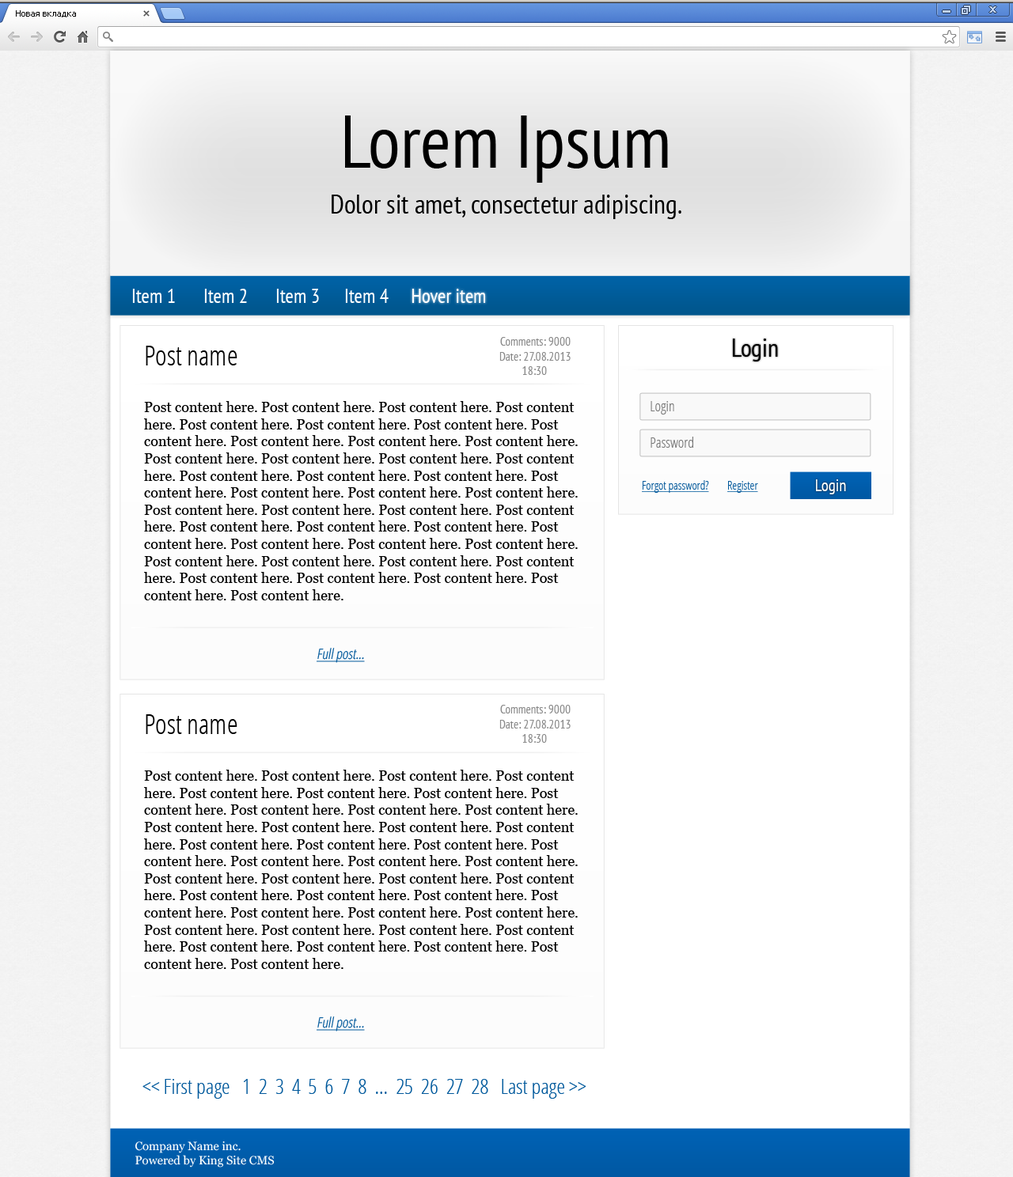
<style>
.page{position:relative;width:1013px;height:1177px;background:#ffffff}
.page>*{position:absolute;margin:0}
.t1{font:74.4px "PTSans-Narrow";color:#000000}
.t2{font:26.9px "PTSans-Narrow";color:#000000}
.t3{font:19.8px "PTSans-Narrow";color:#ffffff}
.t4{font:11.9px "PTSans-Narrow";color:#8b8b8b}
.t5{font:25.3px "PTSans-Narrow";color:#000000}
.t6{font:27.7px "OpenSans-CondensedLight";color:#000000}
.t7{font:14.2px "Georgia";color:#000000}
.t8{font:14.2px "OpenSans-CondensedLight";color:#797979}
.t9{font:11.9px "OpenSans-CondensedLight";color:#00589b;text-decoration:underline}
.t10{font:16.6px "PTSans-Narrow";color:#ffffff}
.t11{font:14.2px "OpenSans-CondensedLight";color:#00589b;font-style:italic;text-decoration:underline}
.t12{font:21.4px "OpenSans-CondensedLight";color:#00599c}
.t13{font:11.9px "Georgia";color:#ffffff}
</style>
<div class="page">
<p class="t1" style="left:345px;top:116px;width:323px;height:67px">Lorem Ipsum</p>
<p class="t2" style="left:332px;top:195px;width:349px;height:24px">Dolor sit amet, consectetur adipiscing.</p>
<p class="t3" style="left:132px;top:289px;width:43px;height:14px">Item 1</p>
<p class="t3" style="left:204px;top:289px;width:43px;height:14px">Item 2</p>
<p class="t3" style="left:276px;top:289px;width:43px;height:14px">Item 3</p>
<p class="t3" style="left:345px;top:289px;width:44px;height:14px">Item 4</p>
<p class="t3" style="left:411px;top:289px;width:75px;height:14px">Hover item</p>
<p class="t4" style="left:500px;top:337px;width:70px;height:9px">Comments: 9000</p>
<p class="t5" style="left:733px;top:339px;width:45px;height:23px">Login</p>
<p class="t6" style="left:146px;top:346px;width:91px;height:20px">Post name</p>
<p class="t4" style="left:499px;top:352px;width:71px;height:23px">Date: 27.08.2013 <br>         18:30</p>
<p class="t7" style="left:144px;top:401px;width:434px;height:200px">Post content here. Post content here. Post content here. Post content here. Post content here. Post content here. Post content here. Post content here. Post content here. Post content here. Post content here. Post content here. Post content here. Post content here. Post content here. Post content here. Post content here. Post content here. Post content here. Post content here. Post content here. Post content here. Post content here. Post content here. Post content here. Post content here. Post content here. Post content here. Post content here. Post content here. Post content here. Post content here. Post content here. Post content here. Post content here. Post content here. Post content here. Post content here. Post content here. Post content here. Post content here. Post content here.</p>
<p class="t8" style="left:650px;top:401px;width:24px;height:14px">Login</p>
<p class="t8" style="left:650px;top:437px;width:43px;height:11px">Password</p>
<p class="t9" style="left:642px;top:480px;width:67px;height:13px">Forgot password?</p>
<p class="t9" style="left:727px;top:481px;width:31px;height:12px">Register</p>
<p class="t10" style="left:816px;top:479px;width:30px;height:16px">Login</p>
<p class="t11" style="left:316px;top:648px;width:49px;height:15px">Full post...</p>
<p class="t4" style="left:500px;top:705px;width:70px;height:9px">Comments: 9000</p>
<p class="t6" style="left:146px;top:714px;width:91px;height:20px">Post name</p>
<p class="t4" style="left:499px;top:720px;width:71px;height:23px">Date: 27.08.2013 <br>         18:30</p>
<p class="t7" style="left:144px;top:770px;width:434px;height:199px">Post content here. Post content here. Post content here. Post content here. Post content here. Post content here. Post content here. Post content here. Post content here. Post content here. Post content here. Post content here. Post content here. Post content here. Post content here. Post content here. Post content here. Post content here. Post content here. Post content here. Post content here. Post content here. Post content here. Post content here. Post content here. Post content here. Post content here. Post content here. Post content here. Post content here. Post content here. Post content here. Post content here. Post content here. Post content here. Post content here. Post content here. Post content here. Post content here. Post content here. Post content here. Post content here.</p>
<p class="t11" style="left:316px;top:1017px;width:49px;height:15px">Full post...</p>
<p class="t12" style="left:142px;top:1079px;width:444px;height:20px">&lt;&lt; First page   1  2  3  4  5  6  7  8  ...  25  26  27  28   Last page &gt;&gt;</p>
<p class="t13" style="left:135px;top:1141px;width:140px;height:27px">Company Name inc. <br>Powered by King Site CMS</p>
</div>
